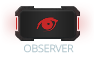
<style>
.page{position:relative;width:94px;height:60px;background:#ffffff}
.page>*{position:absolute;margin:0}
.t1{font:10px "OpenSans-Light";color:#b3c7ce;scale:1.04 1}
</style>
<div class="page">
<p class="t1" style="left:24px;top:44px;width:50px;height:9px">OBSERVER</p>
</div>
